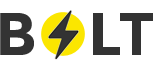
<style>
.page{position:relative;width:160px;height:65px;background:#ffffff}
.page>*{position:absolute;margin:0}
.t1{font:60px "Montserrat-Bold";letter-spacing:-0.01em;color:#333333}
</style>
<div class="page">
<p class="t1" style="left:0px;top:13px;width:34px;height:42px">B</p>
<p class="t1" style="left:93px;top:13px;width:60px;height:42px">LT</p>
</div>
